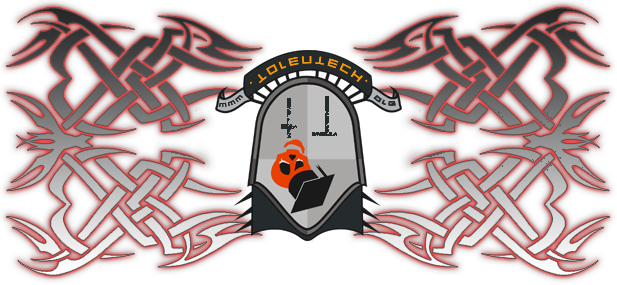
<style>
.page{position:relative;width:617px;height:285px;background:#ffffff}
.page>*{position:absolute;margin:0}
.t1{font:14.6px "unborneditrion";color:#fa9901}
.t2{font:7.3px "unborneditrion";color:#252b2d}
.t3{font:62.5px "BIRTHOFAHERO";color:#252b2d}
.t4{font:9.4px "unborneditrion";color:#252b2d}
</style>
<div class="page">
<p class="t1" style="left:250px;top:56px;width:118px;height:28px">.torentech.</p>
<p class="t1" style="left:250px;top:56px;width:118px;height:28px">.torentech.</p>
<p class="t2" style="left:219px;top:95px;width:24px;height:12px;rotate:-24deg">www</p>
<p class="t2" style="left:219px;top:95px;width:24px;height:12px;rotate:-24deg">www</p>
<p class="t3" style="left:281px;top:98px;width:16px;height:40px">t</p>
<p class="t3" style="left:312px;top:96px;width:25px;height:40px">T</p>
<p class="t4" style="left:373px;top:95px;width:23px;height:11px;rotate:15deg">org</p>
<p class="t4" style="left:373px;top:95px;width:23px;height:11px;rotate:15deg">org</p>
</div>
